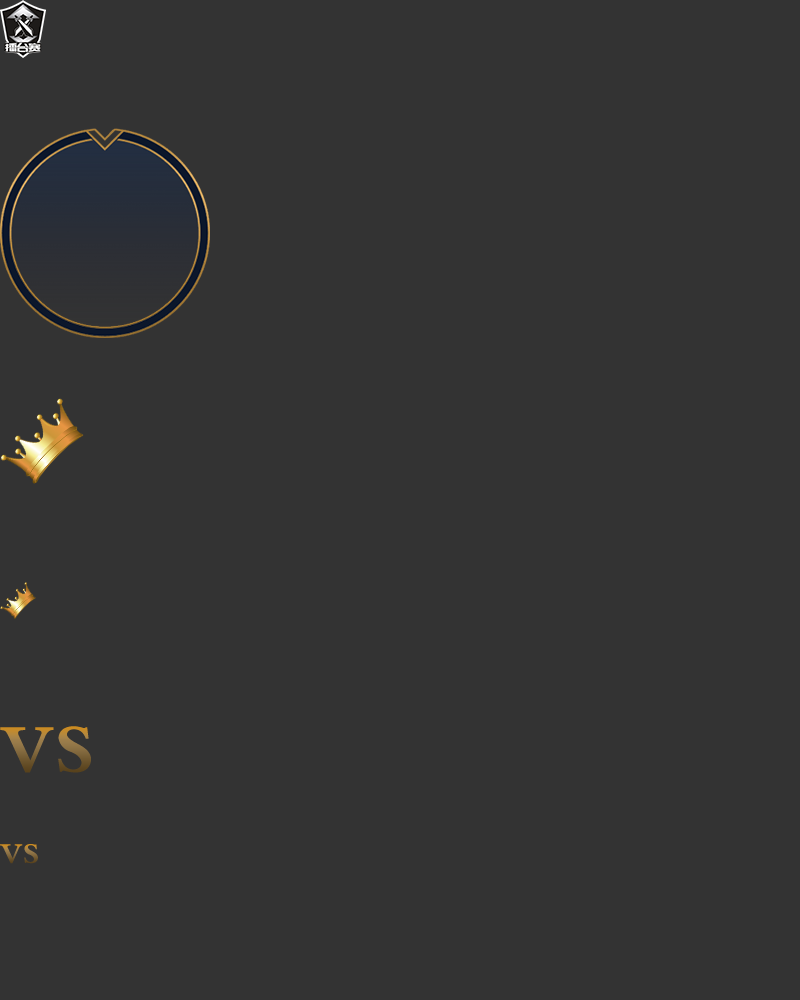
<style>
.page{position:relative;width:800px;height:1000px;background:#333333}
.page>*{position:absolute;margin:0}
.t1{font:72px "Ò¶¸ùÓÑ·ÇÖ÷Á÷ÊÖ"}
.t2{font:30px "Ò¶¸ùÓÑ·ÇÖ÷Á÷ÊÖ"}
</style>
<div class="page">
<p class="t1" style="left:0px;top:726px;width:91px;height:47px">VS</p>
<p class="t2" style="left:0px;top:844px;width:38px;height:20px">VS</p>
</div>
